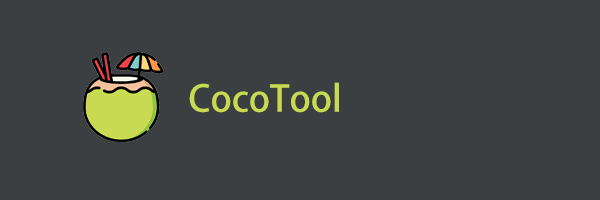
<style>
.page{position:relative;width:600px;height:200px;background:#3c3f41}
.page>*{position:absolute;margin:0}
.t1{font:36px "AdobeHeitiStd-Regular";color:#c8da52}
</style>
<div class="page">
<p class="t1" style="left:189px;top:82px;width:150px;height:31px">CocoTool</p>
</div>
